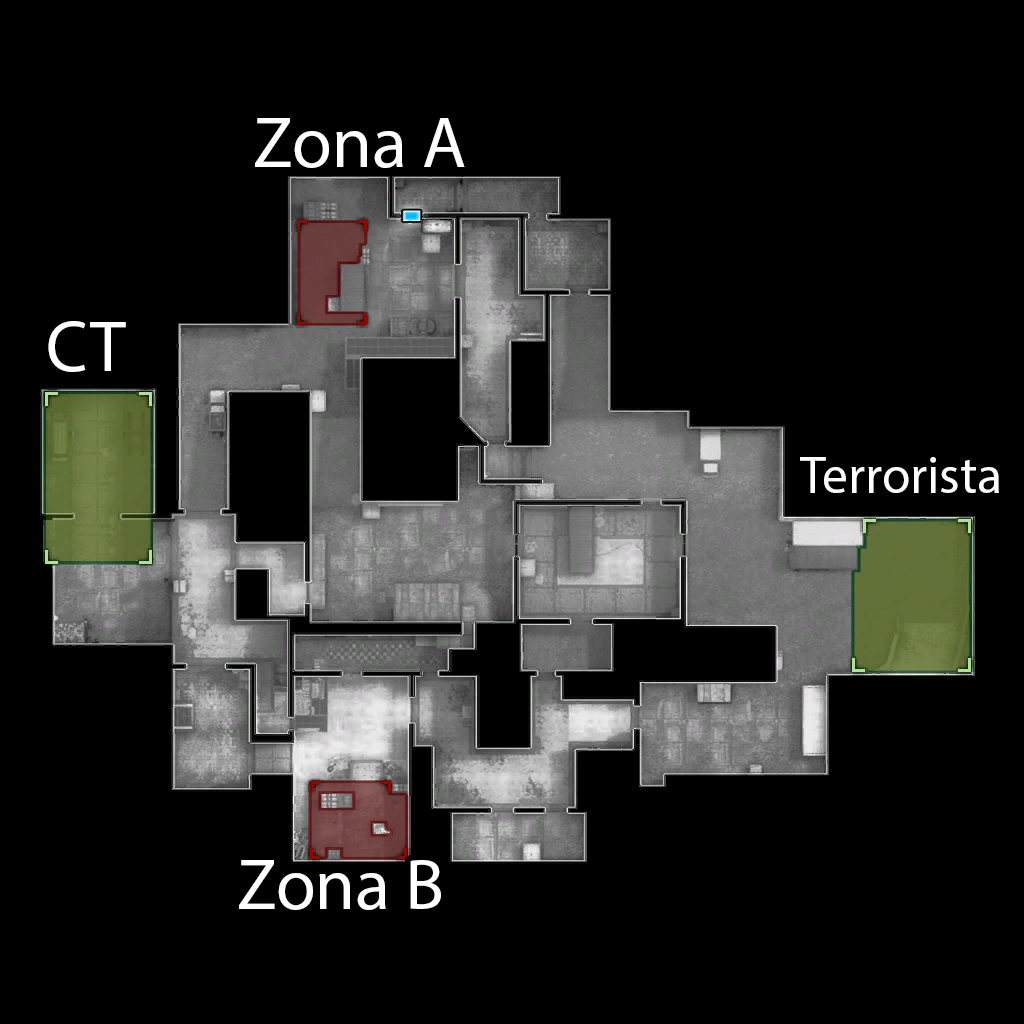
<style>
.page{position:relative;width:1024px;height:1024px;background:#000000}
.page>*{position:absolute;margin:0}
.t1{font:72px "MyriadPro-Regular";color:#ffffff}
.t2{font:51.8px "MyriadPro-Regular";color:#ffffff}
</style>
<div class="page">
<p class="t1" style="left:255px;top:118px;width:210px;height:50px">Zona A</p>
<p class="t1" style="left:48px;top:321px;width:78px;height:51px">CT</p>
<p class="t2" style="left:800px;top:457px;width:199px;height:36px">Terrorista</p>
<p class="t1" style="left:239px;top:860px;width:202px;height:50px">Zona B</p>
</div>
